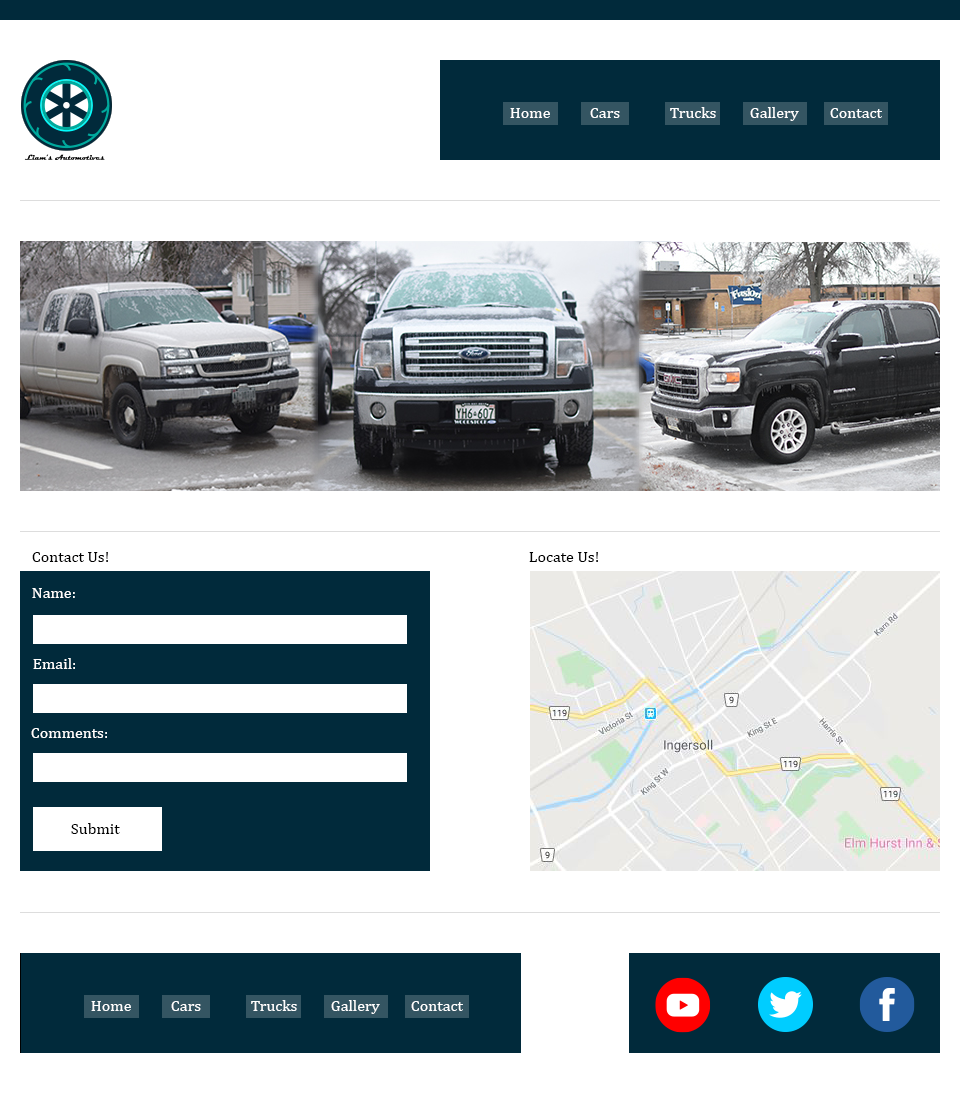
<style>
.page{position:relative;width:960px;height:1093px;background:#ffffff}
.page>*{position:absolute;margin:0}
.t1{font:16px "Cambria";color:#ffffff}
.t2{font:16px "Cambria";color:#010000}
.t3{font:16px "Cambria";color:#000000}
</style>
<div class="page">
<p class="t1" style="left:510px;top:108px;width:40px;height:10px">Home</p>
<p class="t1" style="left:590px;top:108px;width:30px;height:10px">Cars</p>
<p class="t1" style="left:670px;top:107px;width:46px;height:11px">Trucks</p>
<p class="t1" style="left:750px;top:107px;width:49px;height:14px">Gallery</p>
<p class="t1" style="left:830px;top:108px;width:52px;height:10px">Contact</p>
<p class="t2" style="left:32px;top:552px;width:76px;height:10px">Contact Us!</p>
<p class="t3" style="left:529px;top:552px;width:69px;height:10px">Locate Us!</p>
<p class="t1" style="left:32px;top:588px;width:43px;height:10px">Name:</p>
<p class="t1" style="left:33px;top:658px;width:42px;height:11px">Email:</p>
<p class="t1" style="left:31px;top:728px;width:76px;height:10px">Comments:</p>
<p class="t3" style="left:71px;top:823px;width:49px;height:11px">Submit</p>
<p class="t1" style="left:91px;top:1001px;width:40px;height:10px">Home</p>
<p class="t1" style="left:171px;top:1001px;width:30px;height:10px">Cars</p>
<p class="t1" style="left:251px;top:1000px;width:46px;height:11px">Trucks</p>
<p class="t1" style="left:331px;top:1000px;width:49px;height:14px">Gallery</p>
<p class="t1" style="left:411px;top:1001px;width:52px;height:10px">Contact</p>
</div>
